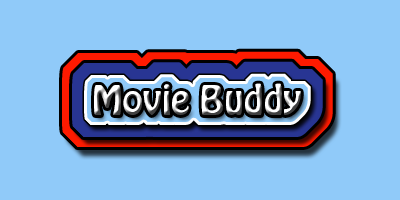
<style>
.page{position:relative;width:400px;height:200px;background:#90caf9}
.page>*{position:absolute;margin:0}
.t1{font:36px "HoboStd"}
</style>
<div class="page">
<p class="t1" style="left:94px;top:83px;width:207px;height:32px">Movie Buddy</p>
</div>
